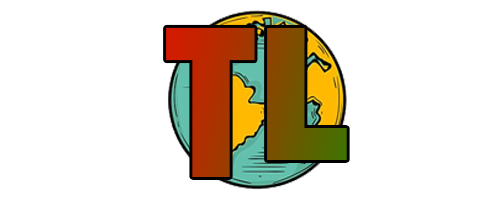
<style>
.page{position:relative;width:500px;height:200px;background:#ffffff}
.page>*{position:absolute;margin:0}
.t1{font:187.4px "Dimitri"}
</style>
<div class="page">
<p class="t1" style="left:166px;top:27px;width:181px;height:150px">TL</p>
</div>
